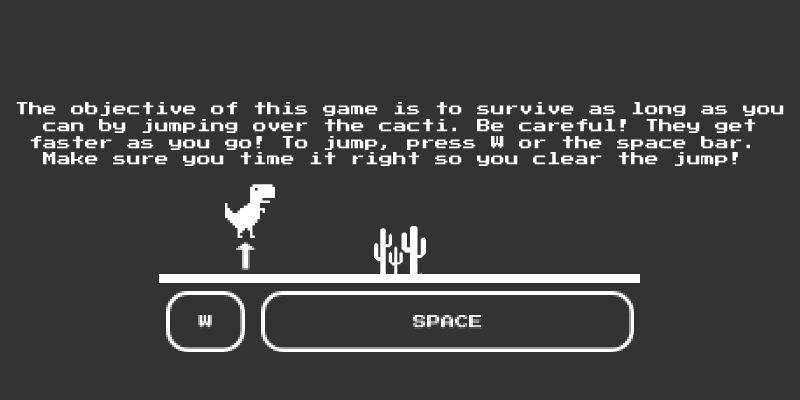
<style>
.page{position:relative;width:800px;height:400px;background:#333333}
.page>*{position:absolute;margin:0}
.t1{font:14px "PressStart2P-Regular";color:#ffffff}
</style>
<div class="page">
<p class="t1" style="left:16px;top:102px;width:768px;height:64px;text-align:center">The objective of this game is to survive as long as you<br>can by jumping over the cacti. Be careful! They get<br>faster as you go! To jump, press W or the space bar. <br>Make sure you time it right so you clear the jump!</p>
</div>
